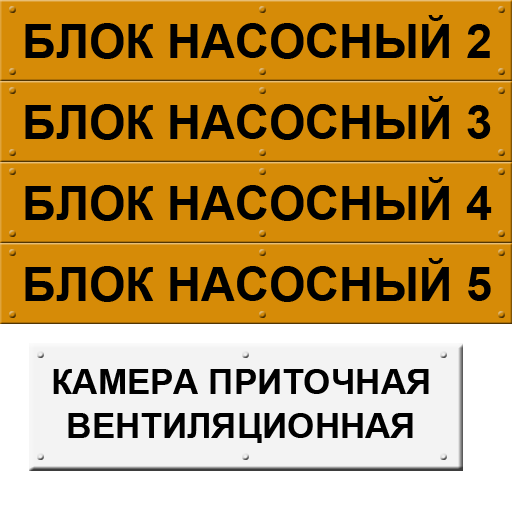
<style>
.page{position:relative;width:512px;height:512px;background:#d68b07}
.page>*{position:absolute;margin:0}
.t1{font:47px "Arial-BoldMT";color:#000000}
.t2{font:35px/44px "Arial-BoldMT";color:#000000}
</style>
<div class="page">
<p class="t1" style="left:25px;top:15px;width:465px;height:44px">БЛОК НАСОСНЫЙ 2</p>
<p class="t1" style="left:25px;top:96px;width:466px;height:44px">БЛОК НАСОСНЫЙ 3</p>
<p class="t1" style="left:25px;top:177px;width:467px;height:44px">БЛОК НАСОСНЫЙ 4</p>
<p class="t1" style="left:25px;top:258px;width:466px;height:44px">БЛОК НАСОСНЫЙ 5</p>
<p class="t2" style="left:53px;top:369px;width:376px;height:74px;text-align:center">КАМЕРА ПРИТОЧНАЯ<br>ВЕНТИЛЯЦИОННАЯ</p>
</div>
